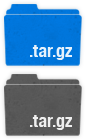
<style>
.page{position:relative;width:88px;height:140px}
.page>*{position:absolute;margin:0}
.t1{font:18px "HelveticaNeue-CondensedBold";color:#e6f2fc}
.t2{font:18px "HelveticaNeue-CondensedBold";color:#ffffff}
</style>
<div class="page">
<p class="t1" style="left:30px;top:45px;width:42px;height:15px">.tar.gz</p>
<p class="t2" style="left:30px;top:115px;width:42px;height:15px;opacity:0.9">.tar.gz</p>
</div>
